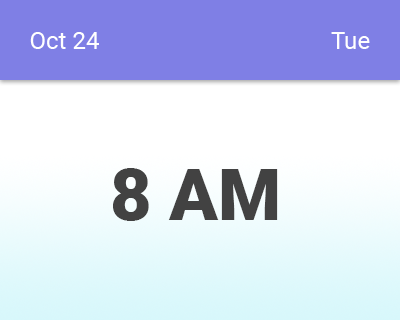
<style>
.page{position:relative;width:400px;height:320px;background:#7f7fe5}
.page>*{position:absolute;margin:0}
.t1{font:24px "Roboto-Regular";color:#ffffff}
.t2{font:72px "Roboto-Black";color:#424242}
</style>
<div class="page">
<p class="t1" style="left:30px;top:32px;width:69px;height:17px">Oct 24</p>
<p class="t1" style="left:331px;top:32px;width:39px;height:17px">Tue</p>
<p class="t2" style="left:113px;top:168px;width:165px;height:53px">8 AM</p>
</div>
